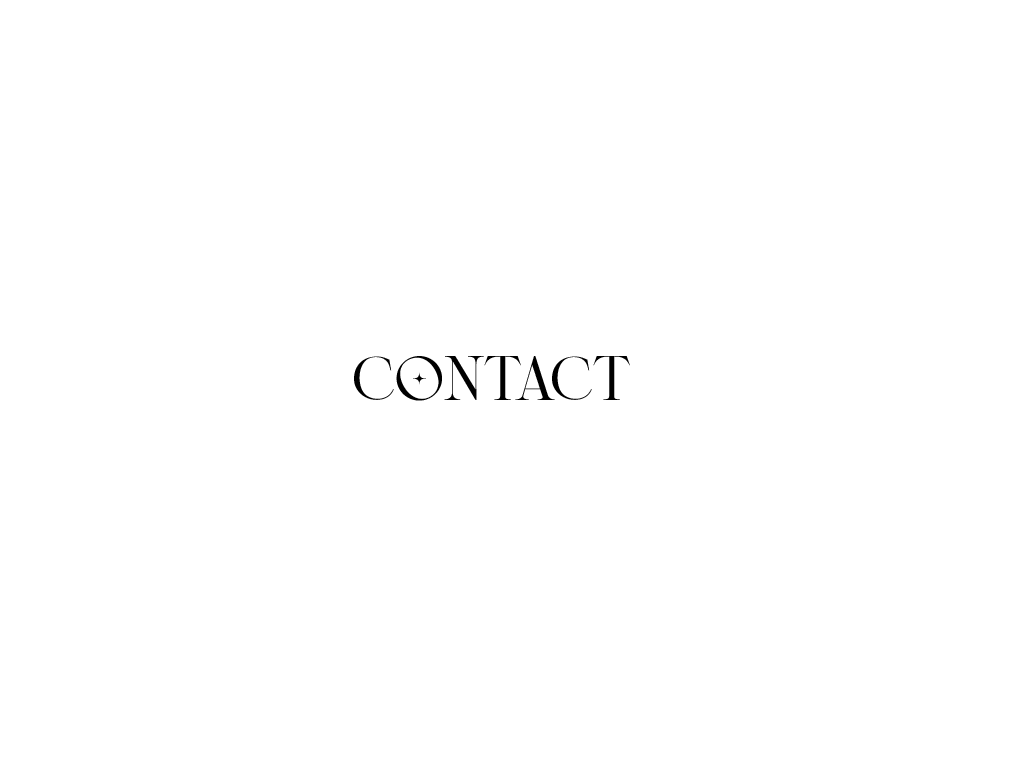
<style>
.page{position:relative;width:1024px;height:768px;background:#ffffff}
.page>*{position:absolute;margin:0}
.t1{font:60px "CerottaPersonalUseOnly";letter-spacing:-0.01em;color:#000000}
</style>
<div class="page">
<p class="t1" style="left:354px;top:356px;width:276px;height:45px">Contact</p>
</div>
